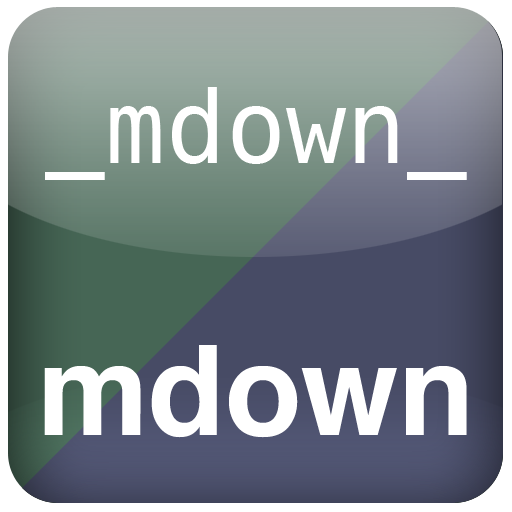
<style>
.page{position:relative;width:512px;height:512px}
.page>*{position:absolute;margin:0}
.t1{font:100px "Menlo-Regular";color:#ffffff}
.t2{font:125px "Helvetica-Bold";color:#ffffff}
</style>
<div class="page">
<p class="t1" style="left:45px;top:87px;width:422px;height:93px">_mdown_</p>
<p class="t2" style="left:44px;top:345px;width:423px;height:93px">mdown</p>
</div>
